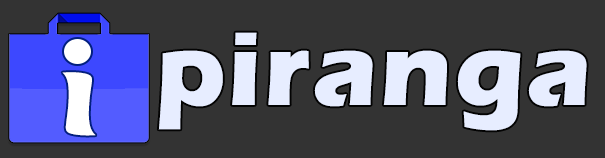
<style>
.page{position:relative;width:605px;height:158px;background:#333333}
.page>*{position:absolute;margin:0}
.t1{font:106.3px "ErasITC-Bold";letter-spacing:0.025em;color:#e7edff}
.t2{font:87.9px "MaiandraGD-Regular";letter-spacing:0.025em;color:#ffffff;scale:2.63 1}
</style>
<div class="page">
<p class="t1" style="left:158px;top:32px;width:429px;height:99px">piranga</p>
<p class="t2" style="left:62px;top:72px;width:34px;height:64px;rotate:8deg">I</p>
</div>
